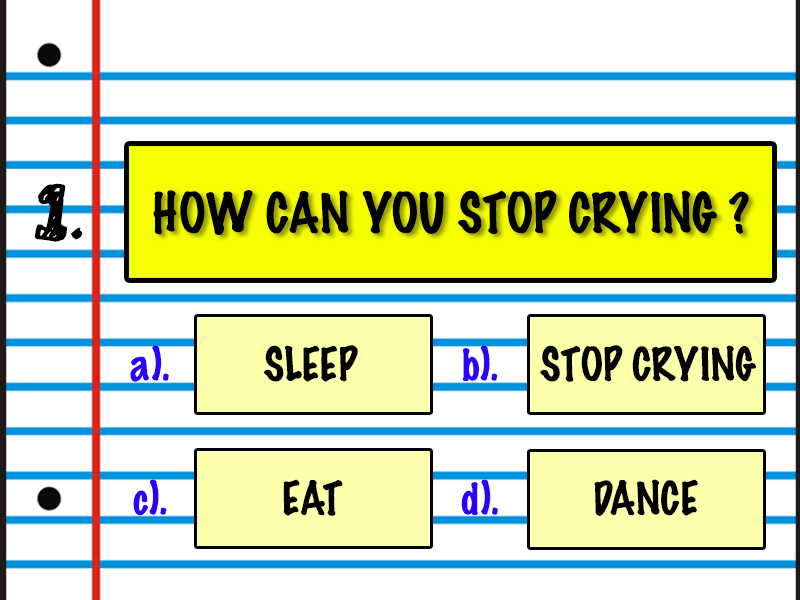
<style>
.page{position:relative;width:800px;height:600px;background:#ffffff}
.page>*{position:absolute;margin:0}
.t1{font:66.7px "Golden-Star";color:#000000}
.t2{font:50px "MarkerFelt-Thin";color:#000000}
.t3{font:41.7px "MarkerFelt-Thin";color:#000000}
.t4{font:41.7px "MarkerFelt-Thin";color:#2a00ff}
</style>
<div class="page">
<p class="t1" style="left:34px;top:183px;width:48px;height:59px">1.</p>
<p class="t2" style="left:153px;top:190px;width:596px;height:45px">HOW CAN YOU STOP CRYING ?</p>
<p class="t3" style="left:130px;top:345px;width:228px;height:37px"><span class="t4">a).         </span>SLEEP</p>
<p class="t3" style="left:462px;top:345px;width:294px;height:37px"><span class="t4">b).    </span>STOP CRYING</p>
<p class="t4" style="left:133px;top:479px;width:210px;height:37px">c).         <span class="t3">  EAT</span></p>
<p class="t3" style="left:461px;top:479px;width:237px;height:37px"><span class="t4">d).        </span> DANCE</p>
</div>
